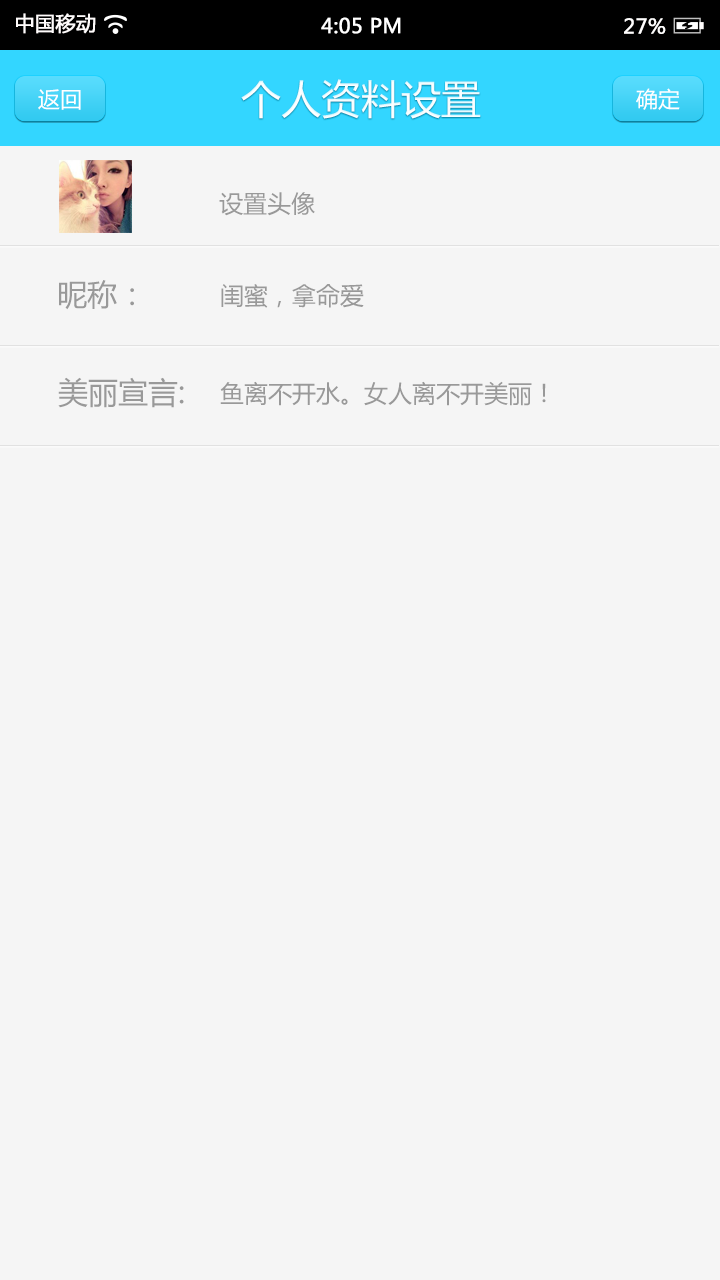
<style>
.page{position:relative;width:720px;height:1280px;background:#f5f5f5}
.page>*{position:absolute;margin:0}
.t1{font:20px "MicrosoftYaHei";color:#fffcfc;font-weight:bold}
.t2{font:20px "MicrosoftYaHei";color:#ffffff;font-weight:bold}
.t3{font:20px "MicrosoftYaHei";color:#fffefe;font-weight:bold}
.t4{font:22px "MicrosoftYaHei";color:#ffffff}
.t5{font:40px "MicrosoftYaHei";color:#ffffff}
.t6{font:24px "MicrosoftYaHei";color:#999999}
.t7{font:30px "MicrosoftYaHei";color:#999999}
</style>
<div class="page">
<p class="t1" style="left:16px;top:13px;width:80px;height:21px">中国移动</p>
<p class="t2" style="left:321px;top:17px;width:80px;height:17px">4:05 PM</p>
<p class="t3" style="left:624px;top:18px;width:42px;height:16px">27%</p>
<p class="t4" style="left:38px;top:89px;width:43px;height:21px">返回</p>
<p class="t5" style="left:241px;top:79px;width:240px;height:40px">个人资料设置</p>
<p class="t4" style="left:636px;top:88px;width:44px;height:22px">确定</p>
<p class="t6" style="left:219px;top:192px;width:96px;height:24px">设置头像</p>
<p class="t7" style="left:59px;top:280px;width:75px;height:30px">昵称：</p>
<p class="t6" style="left:221px;top:284px;width:143px;height:24px">闺蜜，拿命爱</p>
<p class="t7" style="left:58px;top:377px;width:126px;height:31px">美丽宣言:</p>
<p class="t6" style="left:220px;top:381px;width:326px;height:25px">鱼离不开水。女人离不开美丽！</p>
</div>
